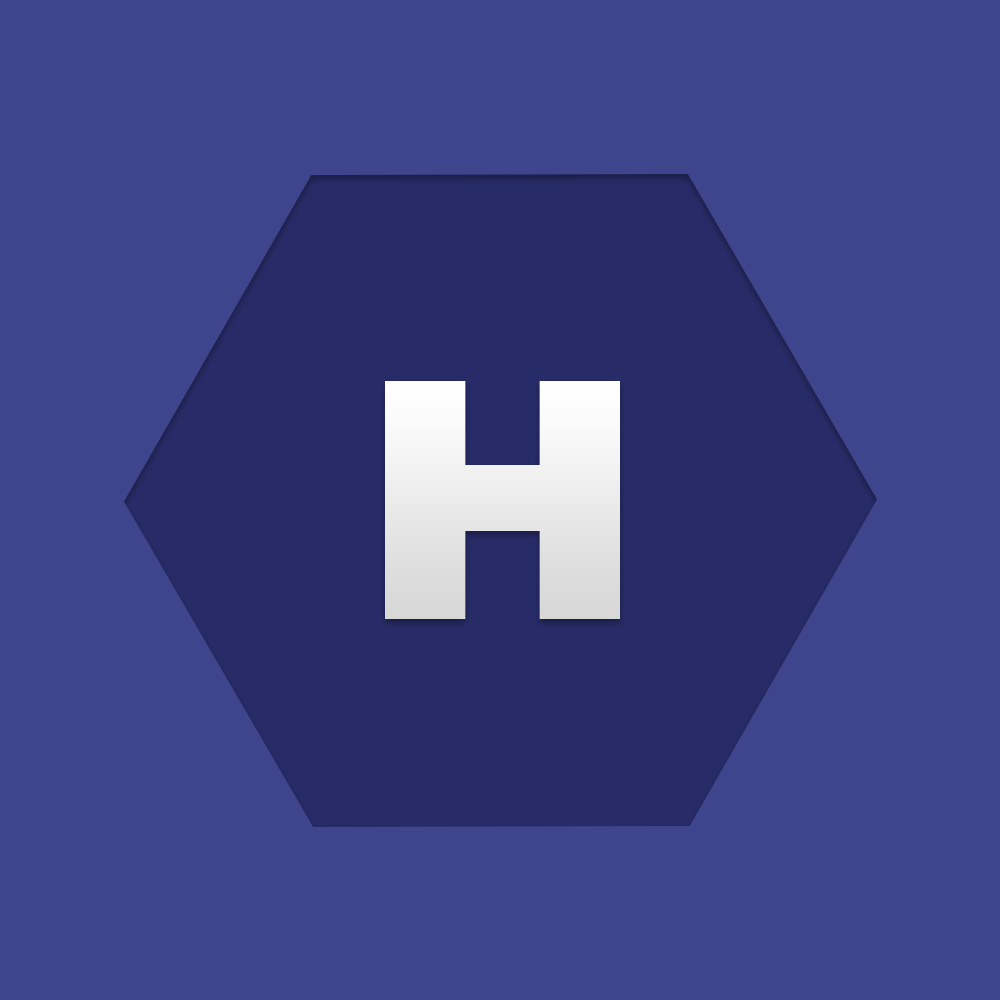
<style>
.page{position:relative;width:1000px;height:1000px;background:#3f458c}
.page>*{position:absolute;margin:0}
.t1{font:339.8px "Montserrat-Black";letter-spacing:-0.05em;color:#fefeff}
</style>
<div class="page">
<p class="t1" style="left:385px;top:381px;width:235px;height:238px">H</p>
</div>
